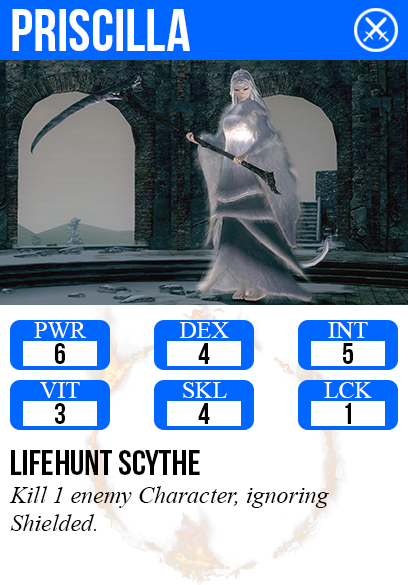
<style>
.page{position:relative;width:408px;height:585px;background:#ffffff}
.page>*{position:absolute;margin:0}
.t1{font:60px "BebasNeue";color:#ffffff}
.t2{font:24px "TimesNewRomanPSMT";color:#ffffff}
.t3{font:30px "BebasNeue";color:#000000}
.t4{font:36px "BebasNeue";color:#000000}
.t5{font:24px "TimesNewRomanPS-ItalicMT";color:#000000}
</style>
<div class="page">
<p class="t1" style="left:12px;top:9px;width:178px;height:42px">priscilla</p>
<p class="t2" style="left:34px;top:322px;width:53px;height:16px">PWR</p>
<p class="t2" style="left:179px;top:322px;width:50px;height:16px">DEX</p>
<p class="t2" style="left:328px;top:322px;width:40px;height:17px">INT</p>
<p class="t3" style="left:55px;top:343px;width:10px;height:21px">6</p>
<p class="t3" style="left:198px;top:343px;width:12px;height:21px">4</p>
<p class="t3" style="left:343px;top:343px;width:10px;height:21px">5</p>
<p class="t2" style="left:40px;top:382px;width:40px;height:16px">VIT</p>
<p class="t2" style="left:183px;top:382px;width:44px;height:16px">SKL</p>
<p class="t2" style="left:324px;top:382px;width:48px;height:16px">LCK</p>
<p class="t3" style="left:55px;top:403px;width:10px;height:21px">3</p>
<p class="t3" style="left:198px;top:403px;width:12px;height:21px">4</p>
<p class="t3" style="left:345px;top:403px;width:6px;height:21px">1</p>
<p class="t4" style="left:11px;top:450px;width:189px;height:25px">lifehunt scythe</p>
<p class="t5" style="left:9px;top:486px;width:320px;height:45px">Kill 1 enemy Character, ignoring<br>Shielded.</p>
</div>
